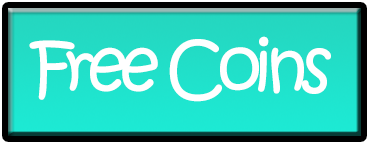
<style>
.page{position:relative;width:369px;height:142px}
.page>*{position:absolute;margin:0}
.t1{font:120px "KristenITC-Regular";letter-spacing:-0.1em;color:#ffffff}
.t2{font:20px "KristenITC-Regular";letter-spacing:-0.1em;color:#ffffff}
</style>
<div class="page">
<p class="t1" style="left:29px;top:36px;width:302px;height:66px"><span class="t2"><br><br><br><br><br><br><br><br><br></span>Free Coins</p>
</div>
